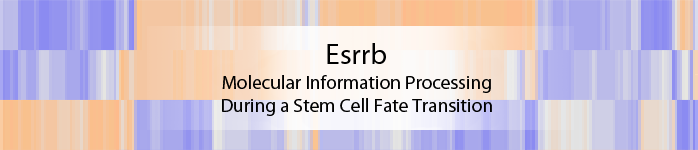
<style>
.page{position:relative;width:698px;height:150px}
.page>*{position:absolute;margin:0}
.t1{font:29px "MyriadPro-Regular";color:#000000}
.t2{font:19.3px "MyriadPro-Regular";color:#000000}
</style>
<div class="page">
<p class="t1" style="left:327px;top:43px;width:59px;height:21px">Esrrb</p>
<p class="t2" style="left:222px;top:75px;width:270px;height:41px;text-align:center">Molecular Information Processing<br>During a Stem Cell Fate Transition</p>
</div>
